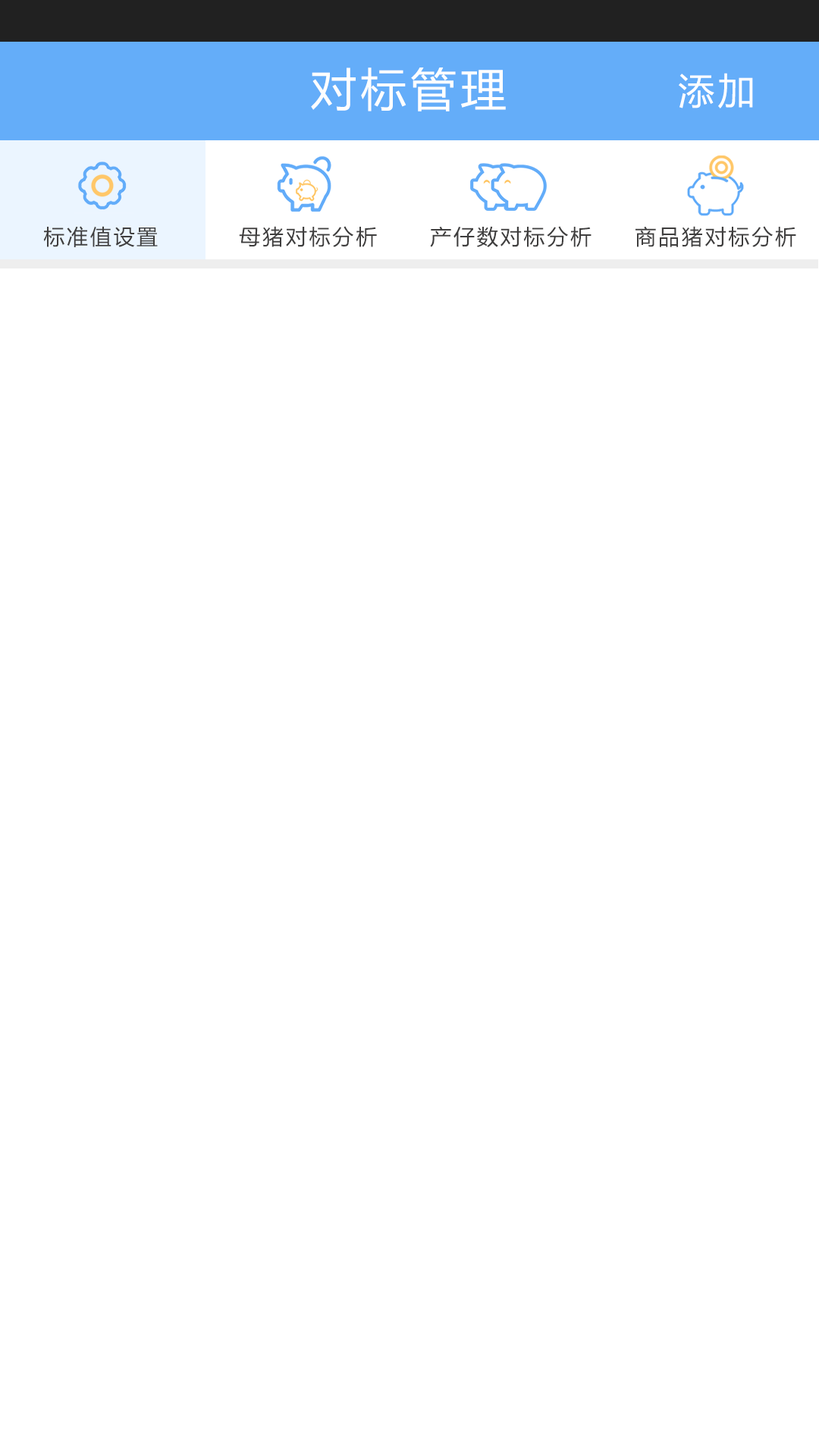
<style>
.page{position:relative;width:819px;height:1456px;background:#ffffff}
.page>*{position:absolute;margin:0}
.t1{font:45.5px "MicrosoftYaHei";letter-spacing:0.1em;color:#fefefe}
.t2{font:36.4px "MicrosoftYaHei";letter-spacing:0.1em;color:#ffffff}
.t3{font:21.2px "MicrosoftYaHei";letter-spacing:0.1em;color:#3f3e3e}
</style>
<div class="page">
<p class="t1" style="left:311px;top:67px;width:195px;height:44px">对标管理</p>
<p class="t2" style="left:679px;top:73px;width:74px;height:35px">添加</p>
<p class="t3" style="left:43px;top:226px;width:115px;height:21px">标准值设置</p>
<p class="t3" style="left:239px;top:226px;width:138px;height:21px">母猪对标分析</p>
<p class="t3" style="left:430px;top:226px;width:161px;height:21px">产仔数对标分析</p>
<p class="t3" style="left:635px;top:226px;width:161px;height:21px">商品猪对标分析</p>
</div>
